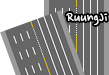
<style>
.page{position:relative;width:109px;height:75px;background:#666666}
.page>*{position:absolute;margin:0}
.t1{font:16px "NanumPen";color:#ffffff}
</style>
<div class="page">
<p class="t1" style="left:66px;top:13px;width:42px;height:12px">RuungJi</p>
</div>
